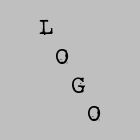
<style>
.page{position:relative;width:140px;height:140px;background:#bfbfbf}
.page>*{position:absolute;margin:0}
.t1{font:24px "RoughTypewriter";color:#000000}
</style>
<div class="page">
<p class="t1" style="left:39px;top:19px;width:62px;height:102px">L<br>  O<br>    G<br>      O</p>
</div>
